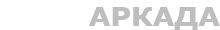
<style>
.page{position:relative;width:220px;height:30px;background:#ffffff}
.page>*{position:absolute;margin:0}
.t1{font:25.8px "Tahoma-Bold";color:#bebebe;scale:1.22 1}
</style>
<div class="page">
<p class="t1" style="left:89px;top:7px;width:131px;height:23px">АРКАДА</p>
</div>
